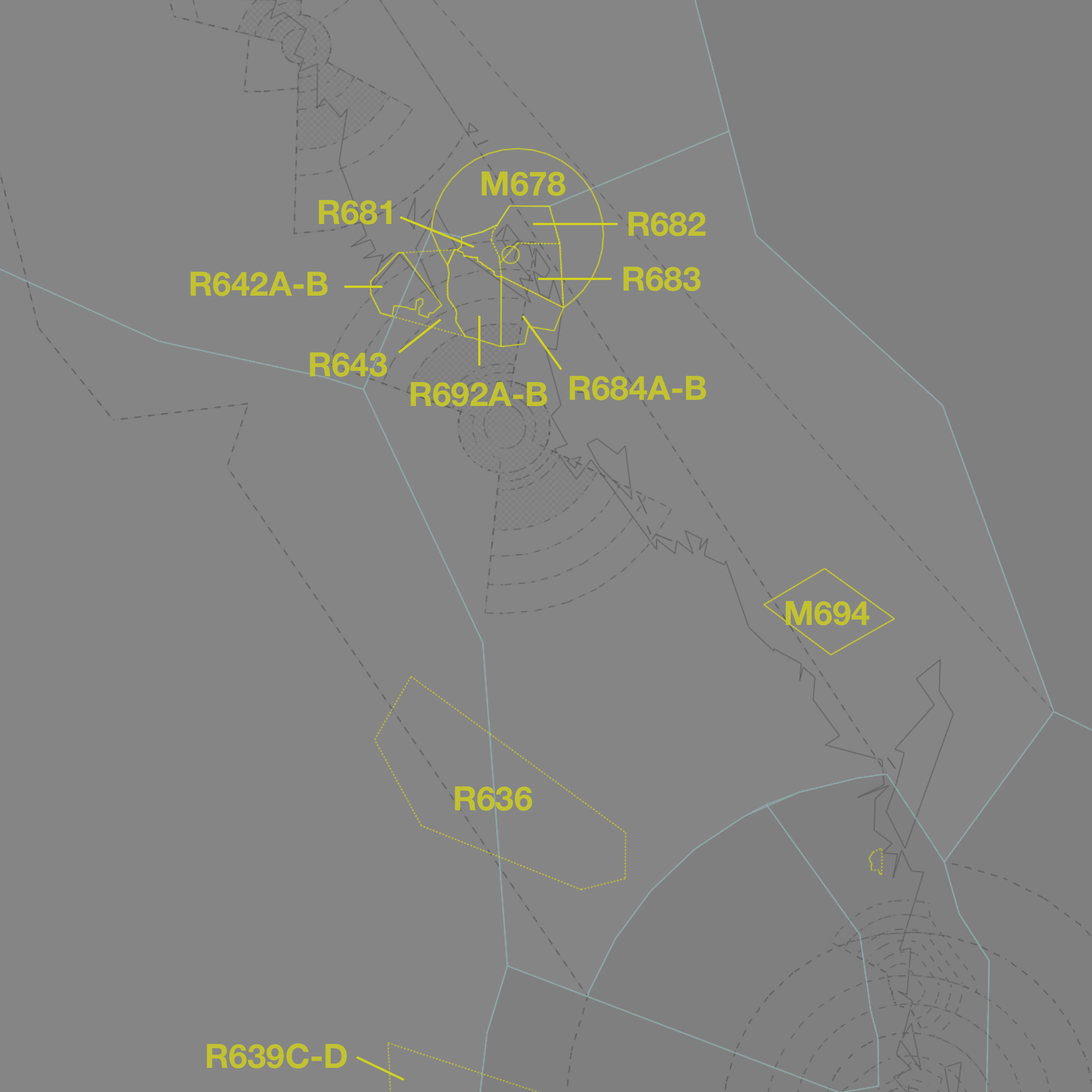
<style>
.page{position:relative;width:1092px;height:1092px;background:#858585}
.page>*{position:absolute;margin:0}
.t1{font:33.6px "HelveticaNeue-Bold";color:#c2c231}
</style>
<div class="page">
<p class="t1" style="left:482px;top:171px;width:84px;height:25px">M678</p>
<p class="t1" style="left:319px;top:200px;width:72px;height:25px">R681</p>
<p class="t1" style="left:628px;top:212px;width:78px;height:24px">R682</p>
<p class="t1" style="left:623px;top:267px;width:78px;height:24px">R683</p>
<p class="t1" style="left:190px;top:272px;width:138px;height:24px">R642A-B</p>
<p class="t1" style="left:310px;top:352px;width:77px;height:25px">R643</p>
<p class="t1" style="left:570px;top:376px;width:136px;height:24px">R684A-B</p>
<p class="t1" style="left:410px;top:382px;width:137px;height:25px">R692A-B</p>
<p class="t1" style="left:786px;top:601px;width:84px;height:25px">M694</p>
<p class="t1" style="left:455px;top:786px;width:78px;height:25px">R636</p>
<p class="t1" style="left:207px;top:1043px;width:140px;height:25px">R639C-D</p>
</div>
